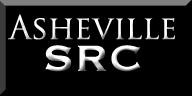
<style>
.page{position:relative;width:192px;height:96px;background:#000000}
.page>*{position:absolute;margin:0}
.t1{font:32px/32px "TrajanPro-Regular"}
.t2{font:48px/32px "Copperplate"}
</style>
<div class="page">
<p class="t1" style="left:8px;top:14px;width:167px;height:58px;text-align:center">Asheville<br><span class="t2">SRC</span></p>
</div>
